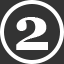
<style>
.page{position:relative;width:64px;height:64px;background:#333333}
.page>*{position:absolute;margin:0}
.t1{font:60px "Georgia-Bold";color:#fffefe}
</style>
<div class="page">
<p class="t1" style="left:16px;top:17px;width:32px;height:33px">2</p>
</div>
